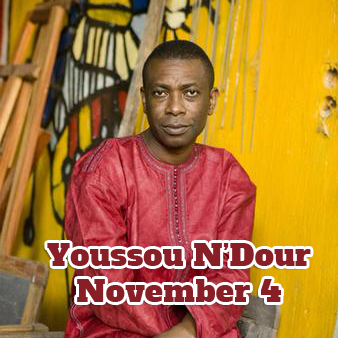
<style>
.page{position:relative;width:338px;height:338px}
.page>*{position:absolute;margin:0}
.t1{font:30px "AlfaSlabOne-Regular";letter-spacing:0.018em;color:#881f26}
</style>
<div class="page">
<p class="t1" style="left:47px;top:243px;width:264px;height:59px;text-align:center">Youssou N’Dour<br>November 4</p>
</div>
